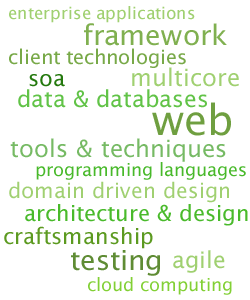
<style>
.page{position:relative;width:250px;height:300px;background:#ffffff}
.page>*{position:absolute;margin:0}
.t1{font:17px "LucidaSans";color:#a0d071}
.t2{font:28px "LucidaSans";color:#80b050}
.t3{font:20px "LucidaSans";color:#78a948}
.t4{font:22px "LucidaSans";color:#24790e}
.t5{font:24px "LucidaSans";color:#a0d071}
.t6{font:23px "LucidaSans";color:#61c347}
.t7{font:42px "LucidaSans";color:#6f9f40}
.t8{font:24px "LucidaSans";color:#76ba64}
.t9{font:18px "LucidaSans";color:#48b92a}
.t10{font:21px "LucidaSans";color:#a0d071}
.t11{font:22px "LucidaSans";color:#49ba2b}
.t12{font:22px "LucidaSans";color:#5c9a20}
.t13{font:28px "LucidaSans";color:#5f8c34}
.t14{font:23px "LucidaSans";color:#a0d071}
.t15{font:18px "LucidaSans";color:#82d035}
</style>
<div class="page">
<p class="t1" style="left:9px;top:6px;width:186px;height:17px">enterprise applications</p>
<p class="t2" style="left:84px;top:23px;width:143px;height:23px">framework</p>
<p class="t3" style="left:9px;top:48px;width:177px;height:20px">client technologies</p>
<p class="t4" style="left:29px;top:74px;width:36px;height:13px">soa</p>
<p class="t5" style="left:132px;top:67px;width:107px;height:20px">multicore</p>
<p class="t6" style="left:18px;top:89px;width:189px;height:19px">data &amp; databases</p>
<p class="t7" style="left:152px;top:102px;width:79px;height:34px">web</p>
<p class="t8" style="left:10px;top:138px;width:216px;height:24px">tools &amp; techniques</p>
<p class="t9" style="left:36px;top:162px;width:210px;height:18px">programming languages</p>
<p class="t10" style="left:9px;top:181px;width:220px;height:22px">domain driven design</p>
<p class="t11" style="left:25px;top:204px;width:223px;height:22px">architecture &amp; design</p>
<p class="t12" style="left:4px;top:226px;width:149px;height:23px">craftsmanship</p>
<p class="t13" style="left:71px;top:250px;width:89px;height:26px">testing</p>
<p class="t14" style="left:173px;top:250px;width:52px;height:23px">agile</p>
<p class="t15" style="left:88px;top:277px;width:144px;height:18px">cloud computing</p>
</div>
